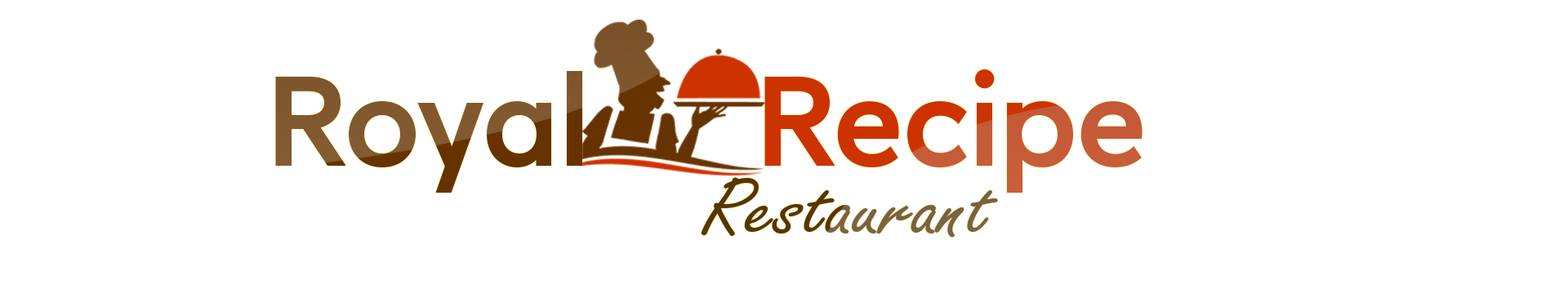
<style>
.page{position:relative;width:1568px;height:289px;background:#ffffff}
.page>*{position:absolute;margin:0}
.t1{font:122.5px "LitSans-Medium"}
.t2{font:86.9px "FreestyleScript-Regular";scale:1.19 1}
</style>
<div class="page">
<p class="t1" style="left:275px;top:69px;width:868px;height:124px">Royal      Recipe</p>
<p class="t2" style="left:701px;top:177px;width:297px;height:61px">Restaurant</p>
</div>
